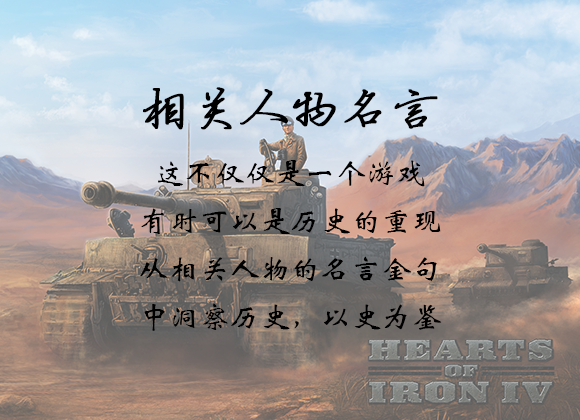
<style>
.page{position:relative;width:580px;height:420px}
.page>*{position:absolute;margin:0}
.t1{font:30px/48px "STXinwei";letter-spacing:0.01em;color:#000000}
.t2{font:48px/72px "FZYBXSJW--GB1-0";letter-spacing:0.01em;color:#000000;font-weight:bold}
</style>
<div class="page">
<p class="t1" style="left:140px;top:87px;width:302px;height:244px;text-align:center"><span class="t2">相关人物名言<br></span>这不仅仅是一个游戏<br>有时可以是历史的重现<br>从相关人物的名言金句中洞察历史，以史为鉴</p>
</div>
